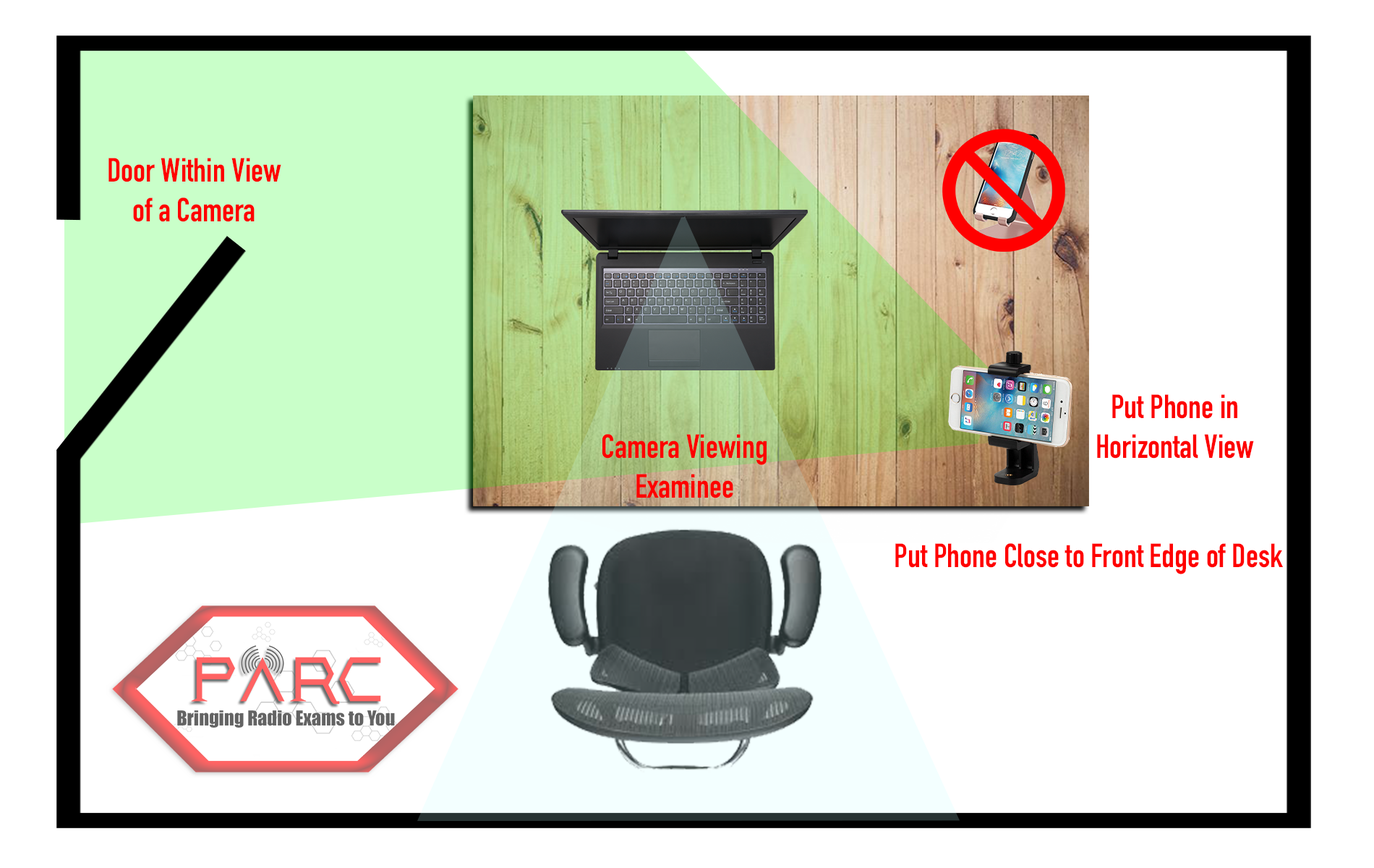
<style>
.page{position:relative;width:1374px;height:868px;background:#ffffff}
.page>*{position:absolute;margin:0}
.t1{font:33.1px "DINCondensed-Bold";color:#ff0000}
.t2{font:33.1px "DINCondensed-Bold";color:#fe0000}
</style>
<div class="page">
<p class="t1" style="left:108px;top:158px;width:173px;height:64px;text-align:center">Door Within View<br>of a Camera</p>
<p class="t2" style="left:1097px;top:394px;width:157px;height:64px;text-align:center">Put Phone in<br>Horizontal View</p>
<p class="t2" style="left:602px;top:434px;width:165px;height:64px;text-align:center">Camera Viewing<br>Examinee</p>
<p class="t1" style="left:895px;top:543px;width:388px;height:31px">Put Phone Close to Front Edge of Desk</p>
</div>
